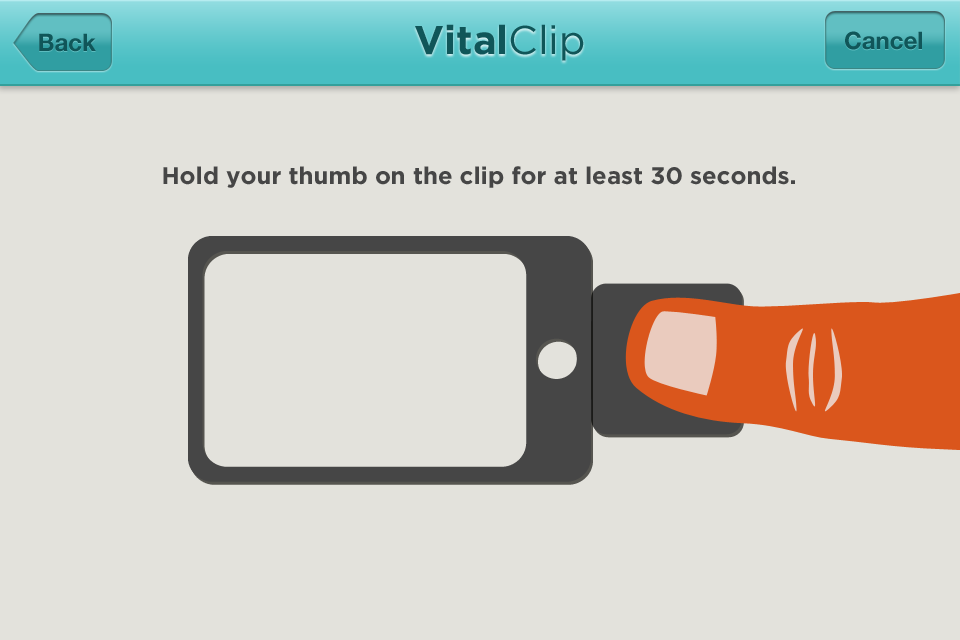
<style>
.page{position:relative;width:960px;height:640px;background:#e3e2dc}
.page>*{position:absolute;margin:0}
.t1{font:40px "Gotham-Bold";color:#105659}
.t2{font:40px "Gotham-Book";color:#105659}
.t3{font:24px "HelveticaNeue-Bold";color:#105659}
.t4{font:24px "Gotham-Bold";color:#464646}
</style>
<div class="page">
<p class="t1" style="left:415px;top:24px;width:169px;height:37px">Vital<span class="t2">Clip</span></p>
<p class="t3" style="left:39px;top:33px;width:57px;height:19px">Back</p>
<p class="t3" style="left:845px;top:31px;width:77px;height:19px">Cancel</p>
<p class="t4" style="left:163px;top:166px;width:632px;height:22px">Hold your thumb on the clip for at least 30 seconds.</p>
</div>
